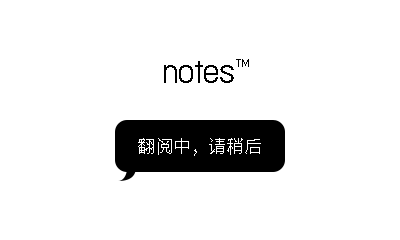
<style>
.page{position:relative;width:400px;height:240px;background:#ffffff}
.page>*{position:absolute;margin:0}
.t1{font:18px "SourceHanSansCN-Medium";color:#ffffff}
</style>
<div class="page">
<p class="t1" style="left:138px;top:138px;width:123px;height:18px">翻阅中，请稍后</p>
</div>
